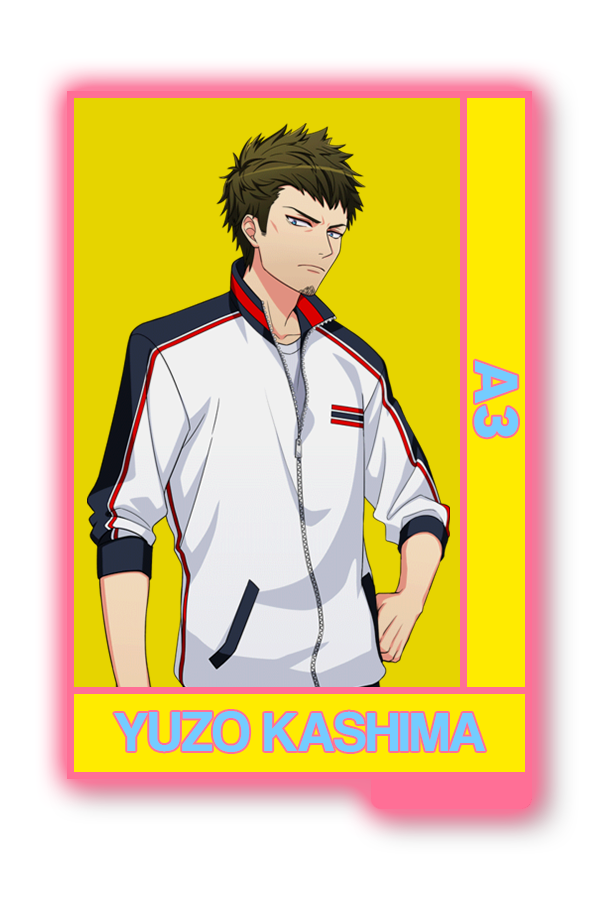
<style>
.page{position:relative;width:600px;height:900px;background:#ffffff}
.page>*{position:absolute;margin:0}
.t1{font:60.5px "MADETOMMY-Bold";color:#74ccff}
.t2{font:56.7px "CoolveticaRg-Regular";color:#74ccff}
</style>
<div class="page">
<p class="t1" style="left:474px;top:360px;width:44px;height:78px;rotate:90deg">A3</p>
<p class="t2" style="left:114px;top:711px;width:372px;height:41px">YUZO KASHIMA</p>
</div>
